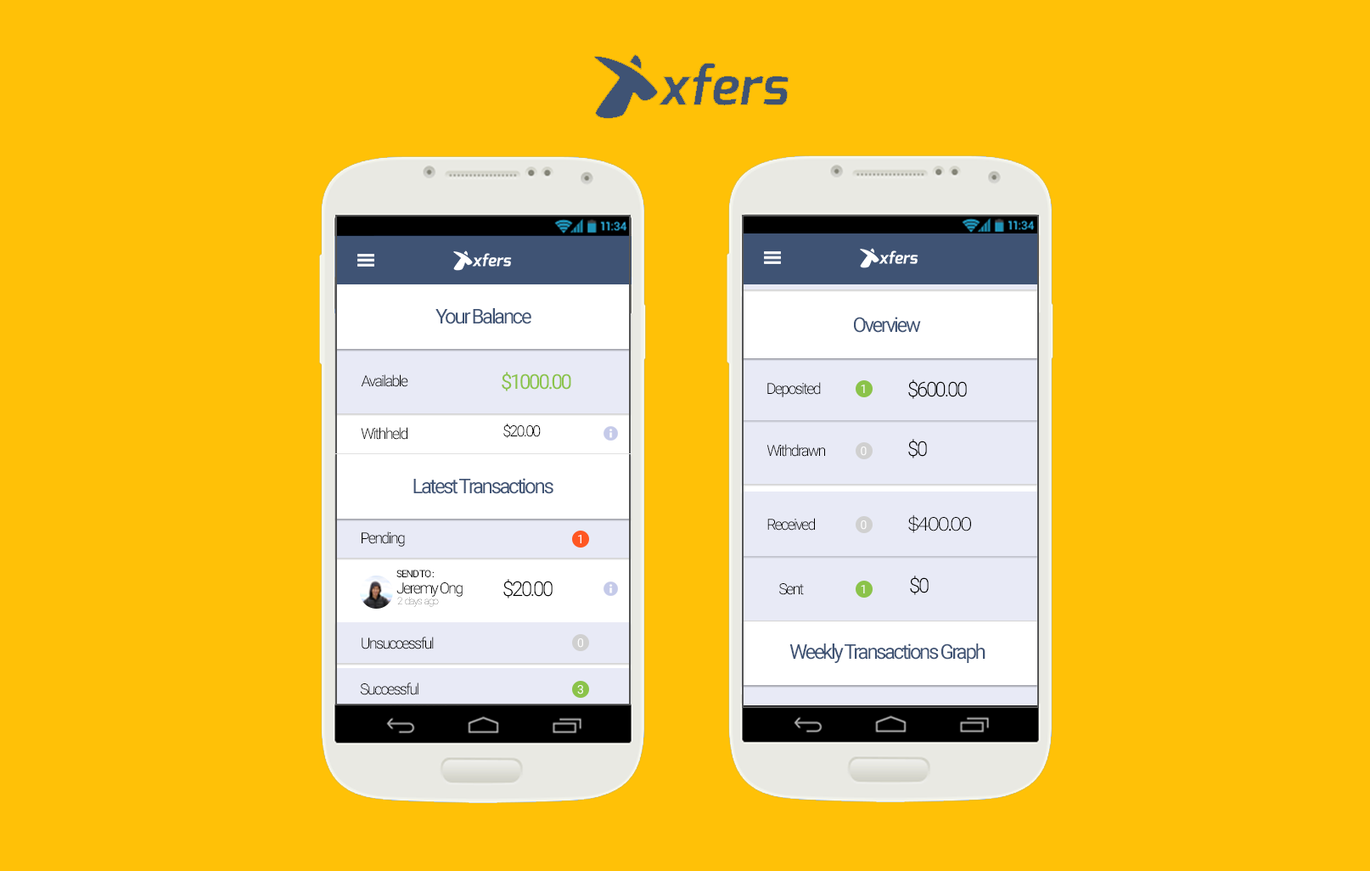
<style>
.page{position:relative;width:1370px;height:871px;background:#ffc107}
.page>*{position:absolute;margin:0}
.t1{font:20.4px "Roboto-Regular";letter-spacing:-0.1em;color:#3f5374}
.t2{font:15.3px "Roboto-Light";letter-spacing:-0.1em;color:#000000}
.t3{font:20.4px "Roboto-Regular";letter-spacing:-0.1em;color:#8bc34a}
.t4{font:11.9px "Roboto-Regular";letter-spacing:-0.1em;color:#ffffff}
.t5{font:20.4px "Roboto-Light";letter-spacing:-0.1em;color:#000000}
.t6{font:20.4px "WorkSans-Light";letter-spacing:-0.1em;color:#000000}
.t7{font:10.2px "Roboto-Regular";letter-spacing:-0.1em;color:#000000}
.t8{font:10.2px "Roboto-Thin";letter-spacing:-0.1em}
</style>
<div class="page">
<p class="t1" style="left:435px;top:308px;width:96px;height:16px">Your Balance</p>
<p class="t1" style="left:854px;top:317px;width:67px;height:16px">Overview</p>
<p class="t2" style="left:361px;top:374px;width:47px;height:13px">Available</p>
<p class="t3" style="left:502px;top:372px;width:69px;height:19px">$1000.00</p>
<p class="t2" style="left:767px;top:382px;width:54px;height:15px">Deposited</p>
<p class="t4" style="left:860px;top:384px;width:5px;height:9px">1</p>
<p class="t5" style="left:908px;top:379px;width:59px;height:20px">$600.00</p>
<p class="t2" style="left:503px;top:423px;width:38px;height:15px">$20.00</p>
<p class="t2" style="left:361px;top:427px;width:46px;height:13px">Withheld</p>
<p class="t2" style="left:766px;top:444px;width:59px;height:13px">Withdrawn</p>
<p class="t4" style="left:860px;top:446px;width:6px;height:10px">0</p>
<p class="t5" style="left:908px;top:439px;width:19px;height:19px">$0</p>
<p class="t1" style="left:413px;top:478px;width:140px;height:16px">Latest Transactions</p>
<p class="t2" style="left:767px;top:518px;width:48px;height:12px">Received</p>
<p class="t4" style="left:860px;top:520px;width:6px;height:10px">0</p>
<p class="t6" style="left:908px;top:514px;width:63px;height:19px">$400.00</p>
<p class="t2" style="left:361px;top:531px;width:44px;height:15px">Pending</p>
<p class="t4" style="left:578px;top:535px;width:3px;height:8px">1</p>
<p class="t7" style="left:396px;top:569px;width:38px;height:8px">SEND TO :</p>
<p class="t5" style="left:503px;top:579px;width:49px;height:19px">$20.00</p>
<p class="t5" style="left:910px;top:575px;width:18px;height:20px">$0</p>
<p class="t2" style="left:396px;top:582px;width:66px;height:15px">Jeremy Ong</p>
<p class="t2" style="left:779px;top:583px;width:25px;height:12px">Sent</p>
<p class="t4" style="left:860px;top:585px;width:5px;height:8px">1</p>
<p class="t8" style="left:397px;top:597px;width:42px;height:10px">2  days  ago</p>
<p class="t2" style="left:361px;top:636px;width:73px;height:13px">Unsuccessful</p>
<p class="t4" style="left:577px;top:638px;width:6px;height:9px">0</p>
<p class="t1" style="left:789px;top:643px;width:196px;height:20px">Weekly Transactions Graph</p>
<p class="t2" style="left:360px;top:682px;width:58px;height:13px">Successful</p>
<p class="t4" style="left:577px;top:685px;width:6px;height:9px">3</p>
</div>
